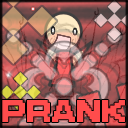
<style>
.page{position:relative;width:128px;height:128px}
.page>*{position:absolute;margin:0}
.t1{font:22px "M42_FLIGHT-721";color:#ff4c4c;scale:0.76 1}
</style>
<div class="page">
<p class="t1" style="left:2px;top:100px;width:123px;height:22px">PRANK</p>
</div>
